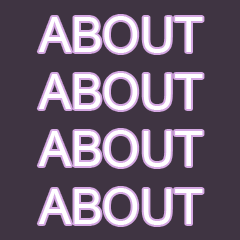
<style>
.page{position:relative;width:240px;height:240px;background:#3f3442}
.page>*{position:absolute;margin:0}
.t1{font:47.7px "ArialMT";color:#ffffff}
</style>
<div class="page">
<p class="t1" style="left:38px;top:16px;width:165px;height:209px">ABOUT<br>ABOUT<br>ABOUT<br>ABOUT</p>
</div>
